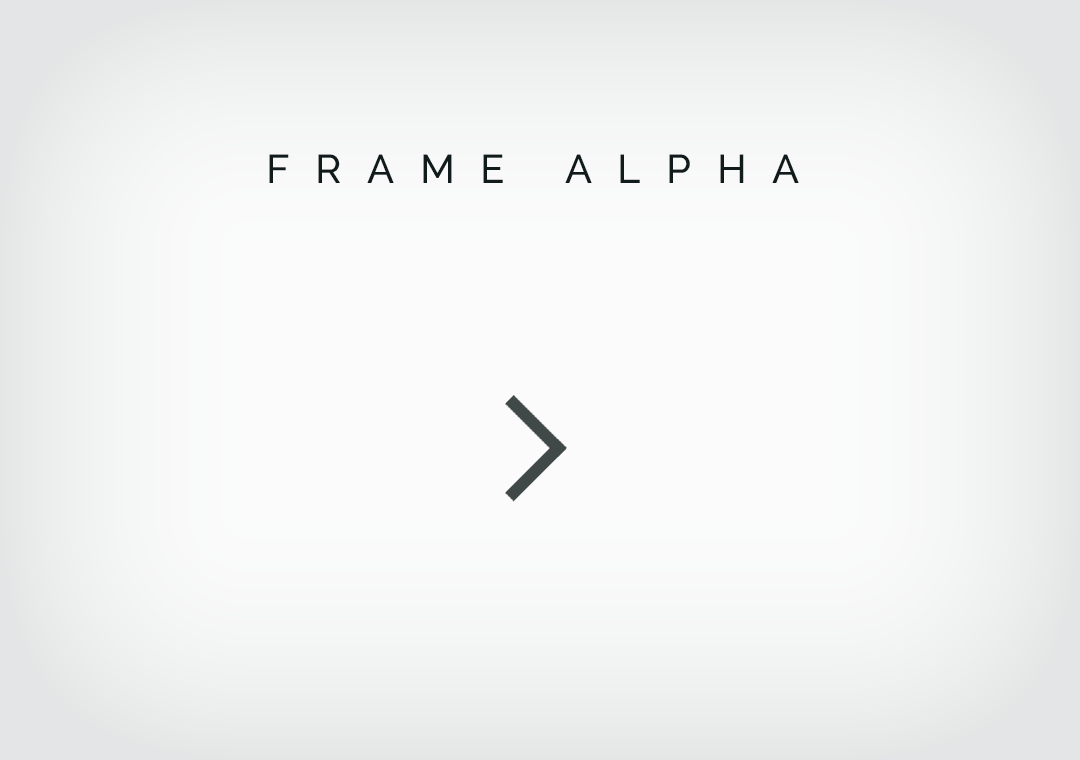
<style>
.page{position:relative;width:1080px;height:760px;background:#fbfbfb}
.page>*{position:absolute;margin:0}
.t1{font:40px "Raleway-Medium";letter-spacing:0.64em;color:#121b1b;text-transform:uppercase}
</style>
<div class="page">
<p class="t1" style="left:269px;top:154px;width:530px;height:29px">Frame Alpha</p>
</div>
